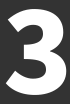
<style>
.page{position:relative;width:70px;height:104px;background:#333333}
.page>*{position:absolute;margin:0}
.t1{font:130.9px "SourceSansPro-Bold";letter-spacing:-0.05em;color:#ffffff}
</style>
<div class="page">
<p class="t1" style="left:5px;top:9px;width:62px;height:86px">3</p>
</div>
